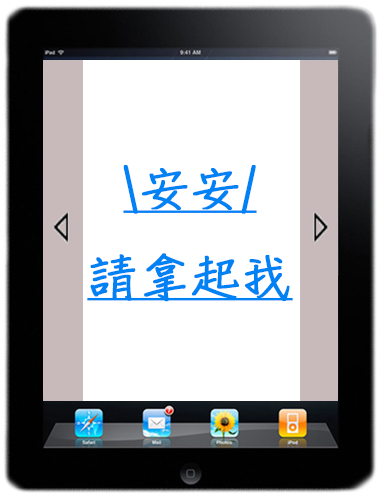
<style>
.page{position:relative;width:380px;height:493px;background:#ffffff}
.page>*{position:absolute;margin:0}
.t1{font:50px "DFChu-W4-WINP-BF";color:#0082f5;font-weight:bold;text-decoration:underline}
</style>
<div class="page">
<p class="t1" style="left:87px;top:165px;width:206px;height:137px;text-align:center">\安安/<br>請拿起我</p>
</div>
